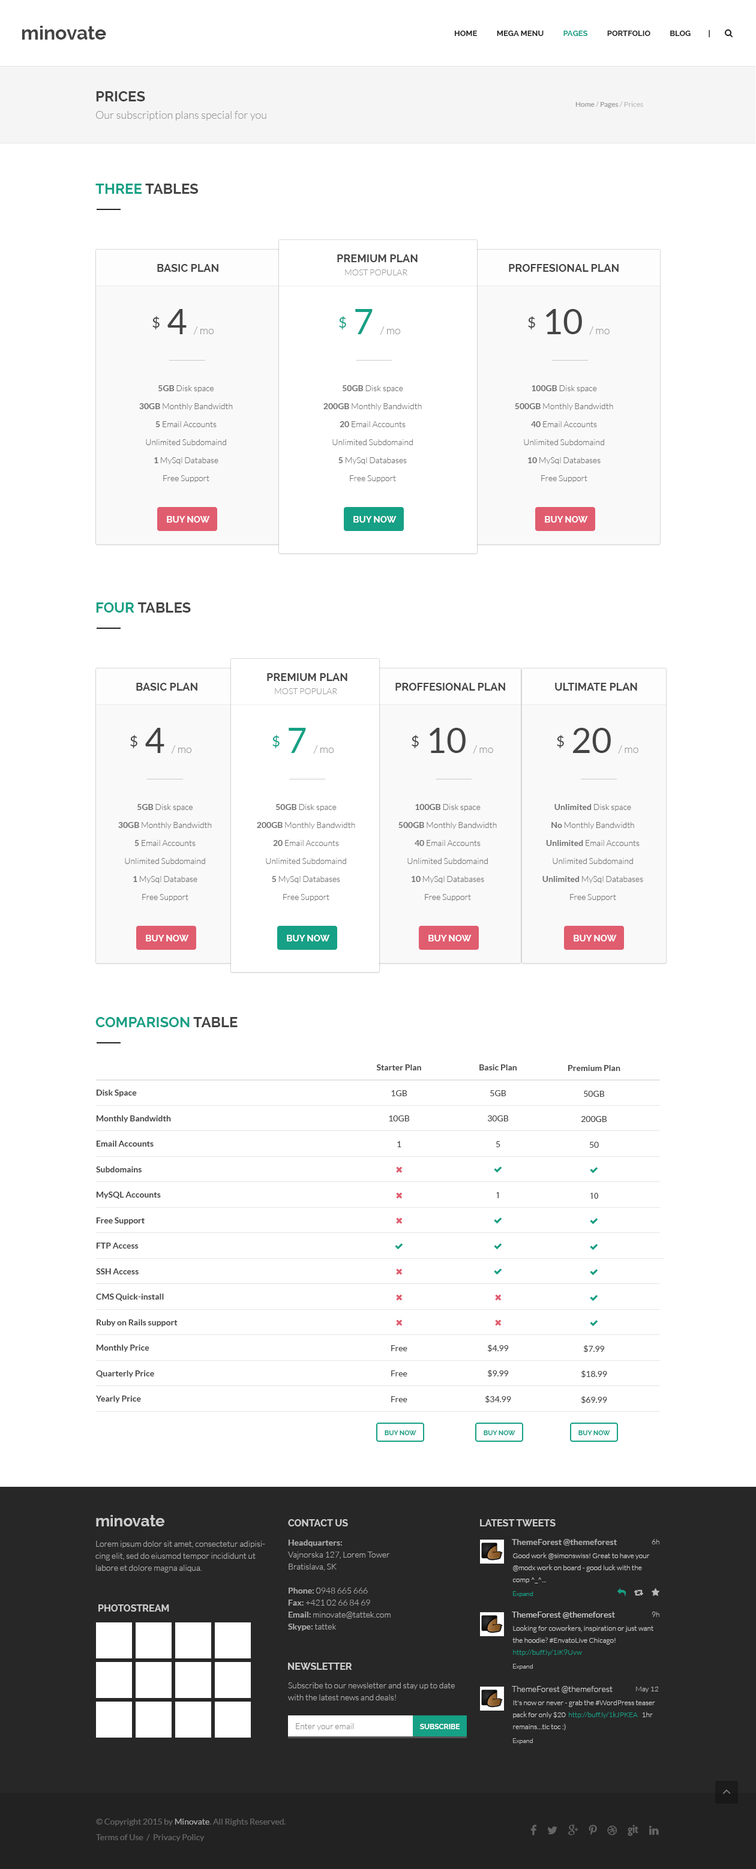
<style>
.page{position:relative;width:756px;height:1869px;background:#ffffff}
.page>*{position:absolute;margin:0}
.t1{font:19.2px "Raleway-Bold";color:#444444}
.t2{font:14.4px "Raleway-Bold";color:#444444;text-transform:uppercase}
.t3{font:7.2px "Lato-Regular";color:#bbbbbb}
.t4{font:7.2px "Lato-Regular";color:#999999}
.t5{font:10.8px "Lato-Light";color:#999999}
.t6{font:14.4px "Raleway-Bold";color:#444444}
.t7{font:14.4px "Raleway-Bold";color:#16a085}
.t8{font:10.8px "Raleway-Bold";color:#444444;text-transform:uppercase}
.t9{font:8.4px "Lato-Light";color:#999999;text-transform:uppercase}
.t10{font:14.4px "Lato-Regular";color:#444444}
.t11{font:34.8px "Lato-Regular";color:#444444}
.t12{font:14.4px "Lato-Regular";color:#16a085}
.t13{font:34.8px "Lato-Regular";color:#16a085}
.t14{font:8.4px/18px "Lato-Light";color:#717171}
.t15{font:8.4px/18px "Lato-Bold";color:#717171}
.t16{font:9px "Raleway-Bold";color:#ffffff}
.t17{font:8.4px/25.5px "Lato-Bold";color:#444444}
.t18{font:6.6px "Raleway-Bold";color:#16a085;text-transform:uppercase}
.t19{font:15.6px "Raleway-Bold";color:#cccccc}
.t20{font:9.6px "Raleway-Bold";color:#cccccc;text-transform:uppercase}
.t21{font:8.4px/12px "Lato-Light";color:#aaaaaa}
.t22{font:8.4px/12px "Lato-Bold";color:#aaaaaa}
.t23{font:8.4px "Lato-Bold";color:#aaaaaa}
.t24{font:7.2px "Lato-Light";color:#b9b9b9}
.t25{font:7.2px/12px "Lato-Light";color:#cccccc}
.t26{font:6.6px "Lato-Light";color:#16a085}
.t27{font:8.4px "Lato-Regular";color:#cccccc}
.t28{font:7.2px/12px "Lato-Light";color:#16a085}
.t29{font:6.6px "Lato-Light";color:#b6b6b6}
.t30{font:8.4px "Lato-Light";color:#cccccc}
.t31{font:8.4px "Lato-Light";color:#8c8c8c}
.t32{font:7.2px "Raleway-Bold";color:#ffffff;text-transform:uppercase}
.t33{font:8.4px "Lato-Regular";color:#666666}
.t34{font:8.4px "Lato-Regular";color:#aaaaaa}
</style>
<div class="page">
<p class="t1" style="left:22px;top:26px;width:84px;height:14px">minovate</p>
<p class="t2" style="left:96px;top:91px;width:49px;height:10px">Prices</p>
<p class="t3" style="left:575px;top:101px;width:68px;height:7px"><span class="t4">Home </span>/<span class="t4"> Pages </span>/ Prices</p>
<p class="t5" style="left:95px;top:111px;width:171px;height:10px">Our subscription plans special for you</p>
<p class="t6" style="left:95px;top:184px;width:103px;height:10px"><span class="t7">THREE </span>TABLES</p>
<p class="t8" style="left:337px;top:254px;width:81px;height:8px">Premium Plan</p>
<p class="t8" style="left:157px;top:264px;width:61px;height:8px">Basic Plan</p>
<p class="t9" style="left:345px;top:269px;width:62px;height:6px">most popular</p>
<p class="t8" style="left:509px;top:264px;width:110px;height:8px">Proffesional Plan</p>
<p class="t10" style="left:152px;top:316px;width:8px;height:13px">$</p>
<p class="t5" style="left:167px;top:309px;width:47px;height:26px"><span class="t11">4 </span>/ mo</p>
<p class="t12" style="left:339px;top:316px;width:7px;height:13px">$</p>
<p class="t5" style="left:355px;top:309px;width:46px;height:26px"><span class="t13">7 </span>/ mo</p>
<p class="t10" style="left:528px;top:316px;width:7px;height:13px">$</p>
<p class="t5" style="left:545px;top:309px;width:65px;height:26px"><span class="t11">10 </span>/ mo</p>
<p class="t14" style="left:139px;top:385px;width:94px;height:97px;text-align:center"><span class="t15">5GB</span> Disk space<br><span class="t15">30GB</span> Monthly Bandwidth<br><span class="t15">5</span> Email Accounts<br>Unlimited Subdomaind<br><span class="t15">1 </span>MySql Database<br>Free Support</p>
<p class="t14" style="left:323px;top:385px;width:99px;height:97px;text-align:center"><span class="t15">50GB</span> Disk space<br><span class="t15">200GB</span> Monthly Bandwidth<br><span class="t15">20</span> Email Accounts<br>Unlimited Subdomaind<br><span class="t15">5 </span>MySql Databases<br>Free Support</p>
<p class="t14" style="left:515px;top:385px;width:98px;height:97px;text-align:center"><span class="t15">100GB</span> Disk space<br><span class="t15">500GB</span> Monthly Bandwidth<br><span class="t15">40</span> Email Accounts<br>Unlimited Subdomaind<br><span class="t15">10 </span>MySql Databases<br>Free Support</p>
<p class="t16" style="left:167px;top:516px;width:43px;height:7px">BUY NOW</p>
<p class="t16" style="left:353px;top:516px;width:44px;height:7px">BUY NOW</p>
<p class="t16" style="left:545px;top:516px;width:43px;height:7px">BUY NOW</p>
<p class="t6" style="left:96px;top:602px;width:95px;height:11px"><span class="t7">FOUR </span>TABLES</p>
<p class="t8" style="left:267px;top:673px;width:80px;height:8px">Premium Plan</p>
<p class="t8" style="left:136px;top:683px;width:61px;height:8px">Basic Plan</p>
<p class="t9" style="left:275px;top:688px;width:62px;height:6px">most popular</p>
<p class="t8" style="left:395px;top:683px;width:110px;height:8px">Proffesional Plan</p>
<p class="t8" style="left:555px;top:683px;width:82px;height:8px">ultimate Plan</p>
<p class="t10" style="left:130px;top:735px;width:7px;height:13px">$</p>
<p class="t5" style="left:145px;top:728px;width:47px;height:26px"><span class="t11">4 </span>/ mo</p>
<p class="t12" style="left:272px;top:735px;width:8px;height:13px">$</p>
<p class="t5" style="left:289px;top:728px;width:45px;height:26px"><span class="t13">7 </span>/ mo</p>
<p class="t10" style="left:412px;top:735px;width:7px;height:13px">$</p>
<p class="t5" style="left:429px;top:728px;width:64px;height:26px"><span class="t11">10 </span>/ mo</p>
<p class="t10" style="left:557px;top:735px;width:7px;height:13px">$</p>
<p class="t5" style="left:573px;top:728px;width:65px;height:26px"><span class="t11">20 </span>/ mo</p>
<p class="t14" style="left:118px;top:804px;width:94px;height:97px;text-align:center"><span class="t15">5GB</span> Disk space<br><span class="t15">30GB</span> Monthly Bandwidth<br><span class="t15">5</span> Email Accounts<br>Unlimited Subdomaind<br><span class="t15">1 </span>MySql Database<br>Free Support</p>
<p class="t14" style="left:257px;top:804px;width:98px;height:97px;text-align:center"><span class="t15">50GB</span> Disk space<br><span class="t15">200GB</span> Monthly Bandwidth<br><span class="t15">20</span> Email Accounts<br>Unlimited Subdomaind<br><span class="t15">5 </span>MySql Databases<br>Free Support</p>
<p class="t14" style="left:398px;top:804px;width:99px;height:97px;text-align:center"><span class="t15">100GB</span> Disk space<br><span class="t15">500GB</span> Monthly Bandwidth<br><span class="t15">40</span> Email Accounts<br>Unlimited Subdomaind<br><span class="t15">10 </span>MySql Databases<br>Free Support</p>
<p class="t14" style="left:542px;top:804px;width:101px;height:97px;text-align:center"><span class="t15">Unlimited</span> Disk space<br><span class="t15">No</span> Monthly Bandwidth<br><span class="t15">Unlimited</span> Email Accounts<br>Unlimited Subdomaind<br><span class="t15">Unlimited </span>MySql Databases<br>Free Support</p>
<p class="t16" style="left:146px;top:935px;width:43px;height:6px">BUY NOW</p>
<p class="t16" style="left:287px;top:935px;width:43px;height:6px">BUY NOW</p>
<p class="t16" style="left:428px;top:935px;width:44px;height:6px">BUY NOW</p>
<p class="t16" style="left:574px;top:935px;width:43px;height:6px">BUY NOW</p>
<p class="t7" style="left:95px;top:1017px;width:143px;height:10px">COMPARISON <span class="t6">TABLE</span></p>
<p class="t17" style="left:96px;top:1090px;width:82px;height:313px">Disk Space<br>Monthly Bandwidth<br>Email Accounts<br>Subdomains<br>MySQL Accounts<br>Free Support<br>FTP Access<br>SSH Access<br>CMS Quick-install<br>Ruby on Rails support<br>Monthly Price<br>Quarterly Price<br>Yearly Price</p>
<p class="t18" style="left:385px;top:1430px;width:31px;height:5px">Buy Now</p>
<p class="t18" style="left:484px;top:1430px;width:31px;height:5px">Buy Now</p>
<p class="t18" style="left:578px;top:1430px;width:32px;height:5px">Buy Now</p>
<p class="t19" style="left:96px;top:1515px;width:68px;height:11px">minovate</p>
<p class="t20" style="left:288px;top:1519px;width:60px;height:7px">Contact Us</p>
<p class="t20" style="left:480px;top:1519px;width:76px;height:7px">Latest Tweets</p>
<p class="t21" style="left:95px;top:1541px;width:170px;height:32px">Lorem ipsum dolor sit amet, consectetur adipisicing elit, sed do eiusmod tempor incididunt ut labore et dolore magna aliqua.</p>
<p class="t21" style="left:288px;top:1540px;width:103px;height:91px"><span class="t22">Headquarters:<br></span>Vajnorska 127, Lorem Tower<br>Bratislava, SK<br><br><span class="t22">Phone: </span>0948 665 666<br><span class="t22">Fax: </span>+421 02 66 84 69<br><span class="t22">Email: </span>minovate@tattek.com<br><span class="t22">Skype:</span> tattek</p>
<p class="t23" style="left:512px;top:1539px;width:105px;height:7px">ThemeForest @themeforest</p>
<p class="t24" style="left:652px;top:1539px;width:7px;height:5px">6h</p>
<p class="t25" style="left:512px;top:1552px;width:138px;height:31px">Good work @simonswiss! Great to have your @modx work on board - good luck with the comp ^_^...<br>^Dan</p>
<p class="t26" style="left:513px;top:1591px;width:20px;height:6px">Expand</p>
<p class="t20" style="left:98px;top:1604px;width:71px;height:8px">Photostream</p>
<p class="t27" style="left:512px;top:1612px;width:103px;height:7px">ThemeForest @themeforest</p>
<p class="t24" style="left:652px;top:1612px;width:7px;height:5px">9h</p>
<p class="t25" style="left:512px;top:1625px;width:141px;height:31px">Looking for coworkers, inspiration or just want the hoodie? #EnvatoLive Chicago! <span class="t28">http://buff.ly/1iK9Uvw<br></span>^Dan</p>
<p class="t20" style="left:288px;top:1663px;width:64px;height:7px">Newsletter</p>
<p class="t29" style="left:513px;top:1664px;width:20px;height:6px">Expand</p>
<p class="t21" style="left:288px;top:1682px;width:167px;height:18px">Subscribe to our newsletter and stay up to date with the latest news and deals!</p>
<p class="t30" style="left:512px;top:1686px;width:101px;height:7px">ThemeForest @themeforest</p>
<p class="t24" style="left:636px;top:1687px;width:23px;height:6px">May 12</p>
<p class="t25" style="left:513px;top:1700px;width:142px;height:30px">It's now or never - grab the #WordPress teaser pack for only $20  <span class="t28">http://buff.ly/1kJPKEA</span>   1hr remains…tic toc :)<br>^Dan</p>
<p class="t31" style="left:296px;top:1723px;width:57px;height:7px">Enter your email</p>
<p class="t32" style="left:420px;top:1724px;width:40px;height:5px">Subscribe</p>
<p class="t29" style="left:513px;top:1738px;width:20px;height:6px">Expand</p>
<p class="t33" style="left:96px;top:1819px;width:190px;height:7px">© Copyright 2015 by <span class="t34">Minovate</span>. All Rights Reserved.</p>
<p class="t33" style="left:96px;top:1834px;width:109px;height:7px">Terms of Use  /  Privacy Policy</p>
</div>
